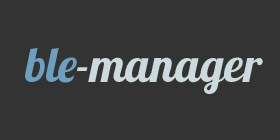
<style>
.page{position:relative;width:280px;height:140px;background:#333333}
.page>*{position:absolute;margin:0}
.t1{font:48px "Lobster1.4";color:#cddadd}
.t2{font:48px "Lobster1.4";color:#6d9fbf}
</style>
<div class="page">
<p class="t1" style="left:25px;top:48px;width:238px;height:46px"><span class="t2">ble</span>-manager</p>
</div>
